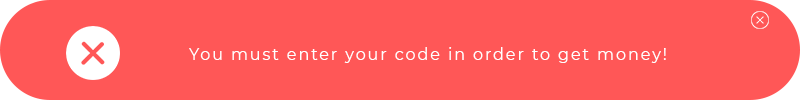
<style>
.page{position:relative;width:800px;height:100px;background:#ff5757}
.page>*{position:absolute;margin:0}
.t1{font:16px "Montserrat-Regular";letter-spacing:0.12em;color:#ffffff}
</style>
<div class="page">
<p class="t1" style="left:189px;top:47px;width:477px;height:16px">You must enter your code in order to get money!</p>
</div>
